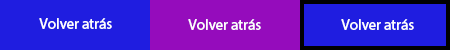
<style>
.page{position:relative;width:450px;height:50px;background:#1f1de0}
.page>*{position:absolute;margin:0}
.t1{font:15px "MyriadHebrew-Regular";color:#fefefe}
</style>
<div class="page">
<p class="t1" style="left:39px;top:18px;width:73px;height:11px">Volver atrás</p>
<p class="t1" style="left:188px;top:19px;width:73px;height:11px">Volver atrás</p>
<p class="t1" style="left:341px;top:19px;width:73px;height:11px">Volver atrás</p>
</div>
